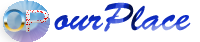
<style>
.page{position:relative;width:200px;height:42px;background:#ffffff}
.page>*{position:absolute;margin:0}
.t1{font:38.9px "BrushScriptStd"}
.t2{font:30.8px "ArialMT";scale:1.38 1}
</style>
<div class="page">
<p class="t1" style="left:54px;top:2px;width:137px;height:30px">ourPlace</p>
<p class="t2" style="left:26px;top:10px;width:23px;height:22px">P</p>
</div>
